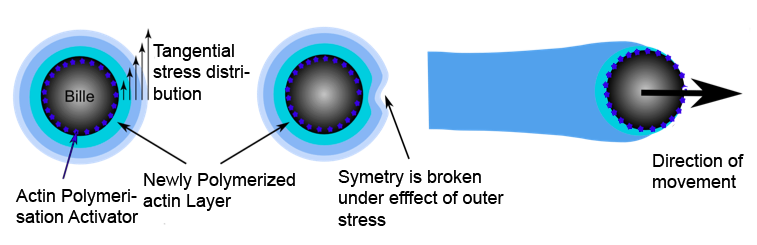
<style>
.page{position:relative;width:757px;height:245px;background:#ffffff}
.page>*{position:absolute;margin:0}
.t1{font:18px "ArialMT";color:#000000}
</style>
<div class="page">
<p class="t1" style="left:153px;top:44px;width:97px;height:56px">Tangential stress distribution</p>
<p class="t1" style="left:653px;top:154px;width:91px;height:34px">Direction of movement</p>
<p class="t1" style="left:143px;top:173px;width:152px;height:38px">Newly Polymerized actin Layer</p>
<p class="t1" style="left:338px;top:170px;width:166px;height:56px">Symetry is broken under efffect of outer stress</p>
<p class="t1" style="left:15px;top:189px;width:124px;height:34px">Actin Polymerisation Activator</p>
</div>
